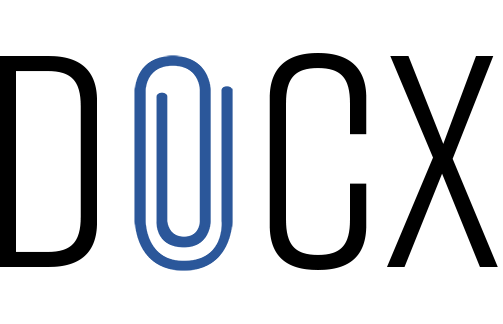
<style>
.page{position:relative;width:503px;height:324px;background:#ffffff}
.page>*{position:absolute;margin:0}
.t1{font:301.2px "Rift-Regular";color:#000000}
</style>
<div class="page">
<p class="t1" style="left:0px;top:53px;width:498px;height:217px">DOCX</p>
</div>
